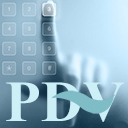
<style>
.page{position:relative;width:128px;height:128px}
.page>*{position:absolute;margin:0}
.t1{font:58.3px "TimesNewRomanPS-BoldMT";color:#ccf0f6}
</style>
<div class="page">
<p class="t1" style="left:6px;top:82px;width:119px;height:40px">PDV</p>
</div>
